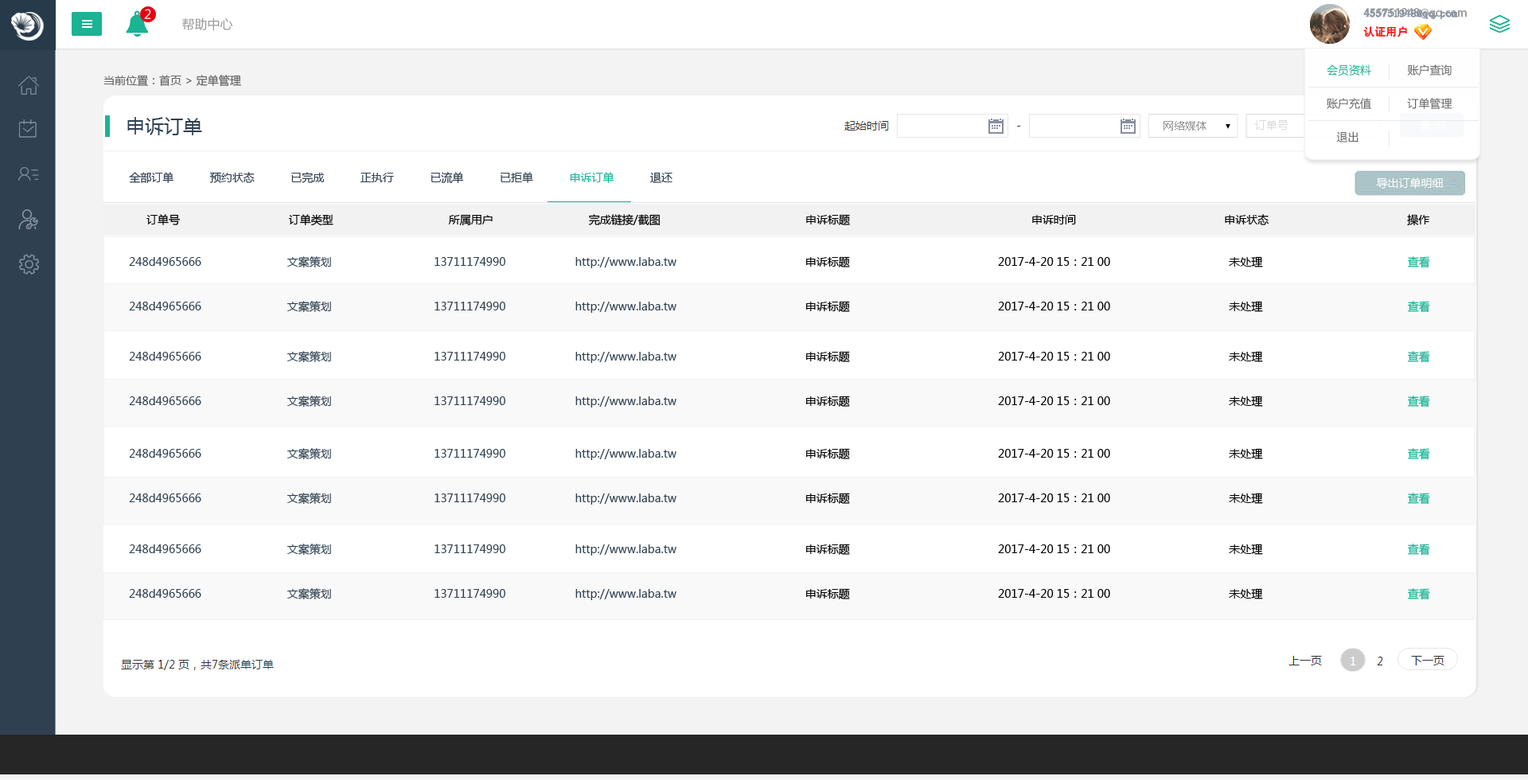
<style>
.page{position:relative;width:1528px;height:780px;background:#ffffff}
.page>*{position:absolute;margin:0}
.t1{font:12.7px "MicrosoftYaHei";color:#ffffff}
.t2{font:12.7px "MicrosoftYaHei";color:#999999}
.t3{font:11.1px/19.1px "AdobeHeitiStd-Regular";color:#999999}
.t4{font:11.1px/19.1px "AdobeHeitiStd-Regular";color:#f61e1e}
.t5{font:11.1px/19.1px "AdobeHeitiStd-Regular";color:#ffffff}
.t6{font:11.1px/19.1px "SimSun";color:#8894a4;font-weight:bold}
.t7{font:11.1px/19.1px "SimSun";color:#f61e1e}
.t8{font:11.1px/33.4px "MicrosoftYaHei";color:#666666}
.t9{font:11.1px/33.4px "MicrosoftYaHei";color:#1ab394}
.t10{font:11.1px "MicrosoftYaHei";color:#666666}
.t11{font:19.1px "MicrosoftYaHei";color:#2f4050}
.t12{font:11.1px "MicrosoftYaHei";color:#999999}
.t13{font:11.1px "MicrosoftYaHei";color:#dcd8d8}
.t14{font:11.1px "MicrosoftYaHei";color:#ffffff}
.t15{font:11.1px "MicrosoftYaHei";color:#2f4050}
.t16{font:11.1px "MicrosoftYaHei";color:#1ab394}
.t17{font:11.1px "MicrosoftYaHei";color:#000000}
</style>
<div class="page">
<p class="t1" style="left:144px;top:9px;width:7px;height:10px">2</p>
<p class="t2" style="left:182px;top:18px;width:51px;height:13px">帮助中心</p>
<p class="t3" style="left:1364px;top:8px;width:103px;height:29px">455751948@qq.com<br><span class="t4">认证用户               </span><span class="t5">退出</span></p>
<p class="t6" style="left:1364px;top:9px;width:94px;height:28px">455751948@qq.com<br><span class="t7">认证用户</span></p>
<p class="t8" style="left:1327px;top:64px;width:126px;height:78px"><span class="t9">会员资料</span>           账户查询<br>账户充值           订单管理           <br>   退出</p>
<p class="t10" style="left:103px;top:75px;width:138px;height:12px">当前位置：首页 &gt; 定单管理</p>
<p class="t11" style="left:127px;top:117px;width:75px;height:18px">申诉订单</p>
<p class="t12" style="left:1164px;top:121px;width:43px;height:10px">网络媒体</p>
<p class="t13" style="left:1255px;top:120px;width:34px;height:10px">订单号</p>
<p class="t14" style="left:1420px;top:119px;width:26px;height:12px">查 询</p>
<p class="t15" style="left:129px;top:172px;width:544px;height:12px">全部订单           预约状态           已完成           正执行           已流单           已拒单           <span class="t16">申诉订单</span>           退还</p>
<p class="t17" style="left:146px;top:214px;width:1285px;height:12px">订单号                                 订单类型                                   所属用户                             完成链接/截图                                            申诉标题                                                       申诉时间                                             申诉状态                                          操作</p>
<p class="t15" style="left:129px;top:256px;width:1302px;height:12px">248d4965666                          文案策划                               13711174990                     http://www.laba.tw       <span class="t17">                                申诉标题                                             2017-4-20 15：21 00                                    未处理                                            </span><span class="t16">查看</span></p>
<p class="t15" style="left:129px;top:301px;width:1302px;height:12px">248d4965666                          文案策划                               13711174990                     http://www.laba.tw       <span class="t17">                                申诉标题                                             2017-4-20 15：21 00                                    未处理                                            </span><span class="t16">查看</span></p>
<p class="t15" style="left:129px;top:351px;width:1302px;height:12px">248d4965666                          文案策划                               13711174990                     http://www.laba.tw       <span class="t17">                                申诉标题                                             2017-4-20 15：21 00                                    未处理                                            </span><span class="t16">查看</span></p>
<p class="t15" style="left:129px;top:396px;width:1302px;height:12px">248d4965666                          文案策划                               13711174990                     http://www.laba.tw       <span class="t17">                                申诉标题                                             2017-4-20 15：21 00                                    未处理                                            </span><span class="t16">查看</span></p>
<p class="t15" style="left:129px;top:448px;width:1302px;height:12px">248d4965666                          文案策划                               13711174990                     http://www.laba.tw       <span class="t17">                                申诉标题                                             2017-4-20 15：21 00                                    未处理                                            </span><span class="t16">查看</span></p>
<p class="t15" style="left:129px;top:493px;width:1302px;height:12px">248d4965666                          文案策划                               13711174990                     http://www.laba.tw       <span class="t17">                                申诉标题                                             2017-4-20 15：21 00                                    未处理                                            </span><span class="t16">查看</span></p>
<p class="t15" style="left:129px;top:544px;width:1302px;height:12px">248d4965666                          文案策划                               13711174990                     http://www.laba.tw       <span class="t17">                                申诉标题                                             2017-4-20 15：21 00                                    未处理                                            </span><span class="t16">查看</span></p>
<p class="t15" style="left:129px;top:588px;width:1302px;height:12px">248d4965666                          文案策划                               13711174990                     http://www.laba.tw       <span class="t17">                                申诉标题                                             2017-4-20 15：21 00                                    未处理                                            </span><span class="t16">查看</span></p>
</div>
